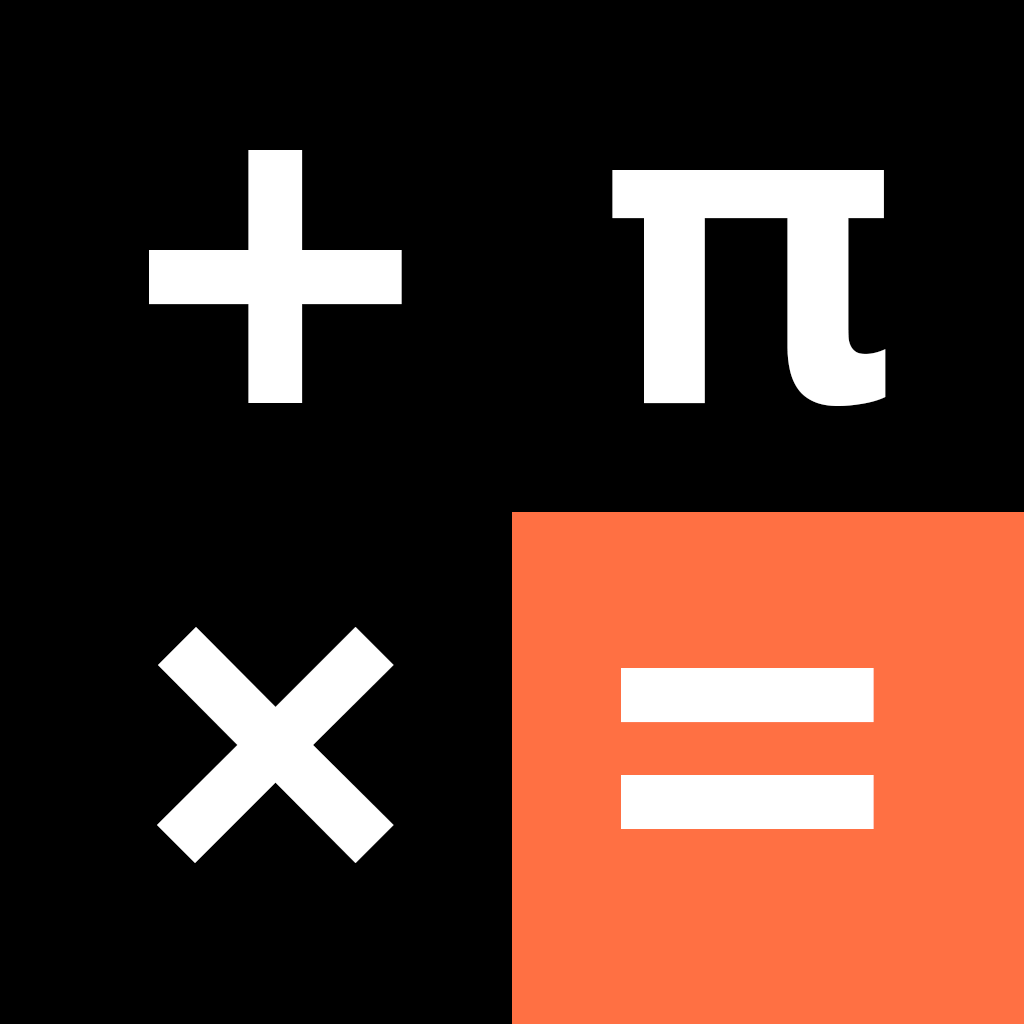
<style>
.page{position:relative;width:1024px;height:1024px;background:#000000}
.page>*{position:absolute;margin:0}
.t1{font:500px "HelveticaNeue-Bold";color:#ffffff}
.t2{font:450px "HelveticaNeue-Bold";color:#ffffff}
</style>
<div class="page">
<p class="t1" style="left:149px;top:150px;width:253px;height:253px">+</p>
<p class="t2" style="left:612px;top:170px;width:274px;height:236px">π</p>
<p class="t1" style="left:157px;top:627px;width:237px;height:236px">×</p>
<p class="t1" style="left:621px;top:668px;width:253px;height:161px">=</p>
</div>
